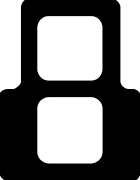
<style>
.page{position:relative;width:140px;height:180px;background:#000000}
.page>*{position:absolute;margin:0}
.t1{font:398.3px "MICREncoding";color:#000000}
</style>
<div class="page">
<p class="t1" style="left:0px;top:0px;width:141px;height:182px">8</p>
</div>
